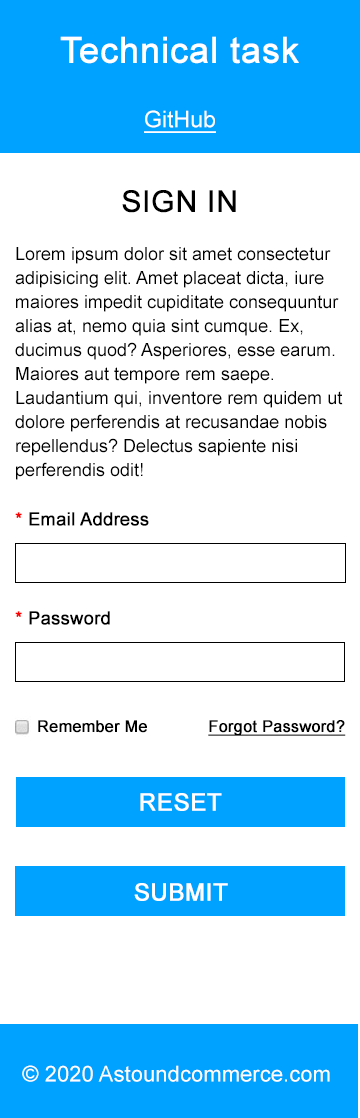
<style>
.page{position:relative;width:360px;height:1118px;background:#ffffff}
.page>*{position:absolute;margin:0}
.t1{font:36px "ArialMT";color:#ffffff;font-weight:bold}
.t2{font:23.1px "ArialMT";color:#ffffff;text-decoration:underline}
.t3{font:18px/24px "ArialMT";color:#000000}
.t4{font:30px/60px "ArialMT";color:#000000;text-transform:uppercase;font-weight:bold}
.t5{font:18px/24px "ArialMT";color:#000000;font-weight:bold}
.t6{font:18px "ArialMT";color:#000000;font-weight:bold}
.t7{font:18px "ArialMT";color:#ff0000;font-weight:bold}
.t8{font:16px "ArialMT";color:#000000;font-weight:bold}
.t9{font:16px "ArialMT";color:#000000;font-weight:bold;text-decoration:underline}
.t10{font:24px "ArialMT";color:#ffffff;text-transform:uppercase;font-weight:bold}
.t11{font:22.1px "ArialMT";color:#ffffff}
</style>
<div class="page">
<p class="t1" style="left:60px;top:36px;width:239px;height:28px">Technical task</p>
<p class="t2" style="left:144px;top:110px;width:72px;height:23px">GitHub</p>
<p class="t3" style="left:15px;top:190px;width:328px;height:290px;text-align:center"><span class="t4">Sign In<br><br></span>Lorem ipsum dolor sit amet consectetur adipisicing elit. Amet placeat dicta, iure maiores impedit cupiditate consequuntur alias at, nemo quia sint cumque. Ex, ducimus quod? Asperiores, esse earum. Maiores aut tempore rem saepe. Laudantium qui, inventore rem quidem ut dolore perferendis at recusandae nobis repellendus? Delectus sapiente nisi perferendis odit!<br><span class="t5"><br>Lorem ipsum dolor, sit amet consectetur adipisicing:<br></span>- Lorem ipsum dolor sit, amet consectetur adipisicing elit.<br>- Lorem ipsum dolor sit amet consectetur adipisicing elit. Eligendi, dolorem!<br>- Lorem ipsum dolor sit.</p>
<p class="t6" style="left:15px;top:512px;width:134px;height:14px"><span class="t7">*</span> Email Address</p>
<p class="t6" style="left:15px;top:611px;width:95px;height:14px"><span class="t7">*</span> Password</p>
<p class="t8" style="left:38px;top:720px;width:109px;height:13px">Remember Me</p>
<p class="t9" style="left:208px;top:720px;width:138px;height:16px">Forgot Password?</p>
<p class="t10" style="left:140px;top:793px;width:82px;height:18px">Reset</p>
<p class="t10" style="left:134px;top:883px;width:94px;height:18px">Submit</p>
<p class="t11" style="left:22px;top:1065px;width:308px;height:17px">© 2020 Astoundcommerce.com</p>
</div>
